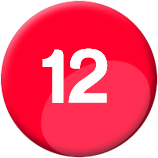
<style>
.page{position:relative;width:158px;height:158px;background:#ff002c}
.page>*{position:absolute;margin:0}
.t1{font:77.4px "HarabaraMaisBold-HarabaraMaisBold";color:#fdfefd}
</style>
<div class="page">
<p class="t1" style="left:42px;top:48px;width:66px;height:55px">12</p>
<p class="t1" style="left:42px;top:48px;width:66px;height:55px">12</p>
</div>
